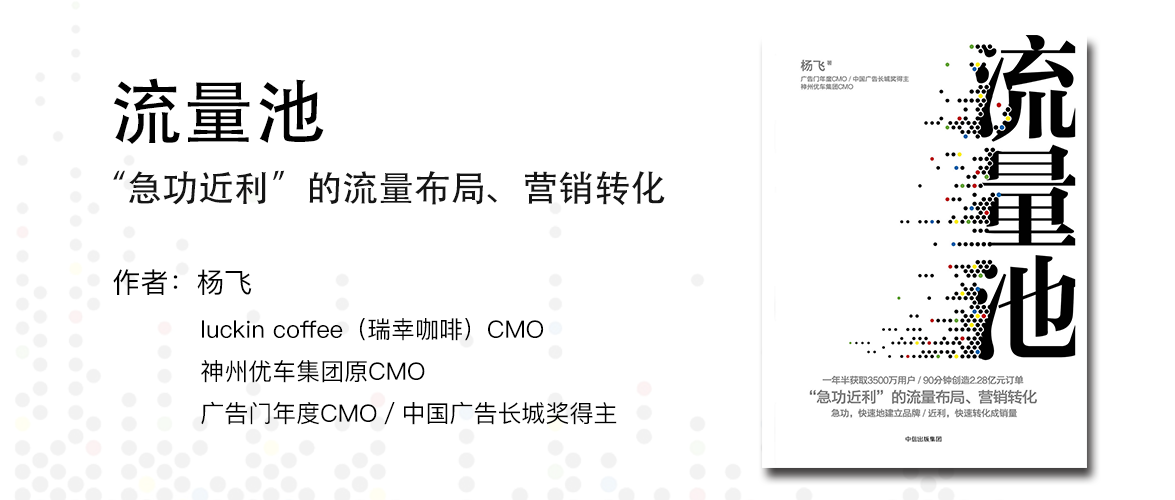
<style>
.page{position:relative;width:1175px;height:500px;background:#ffffff}
.page>*{position:absolute;margin:0}
.t1{font:72px "AdobeHeitiStd-Regular";color:#010101}
.t2{font:36px "AdobeHeitiStd-Regular";color:#151515}
.t3{font:24px "PingFangSC-Regular";color:#010101}
.t4{font:28px "PingFangSC-Regular";color:#010101}
</style>
<div class="page">
<p class="t1" style="left:113px;top:78px;width:211px;height:66px">流量池</p>
<p class="t2" style="left:113px;top:170px;width:552px;height:36px">“急功近利”的流量布局、营销转化</p>
<p class="t3" style="left:113px;top:269px;width:504px;height:156px"><span class="t4">作者：杨飞<br></span>           luckin coffee（瑞幸咖啡）CMO<br>           神州优车集团原CMO<br>           广告门年度CMO／中国广告长城奖得主</p>
</div>
